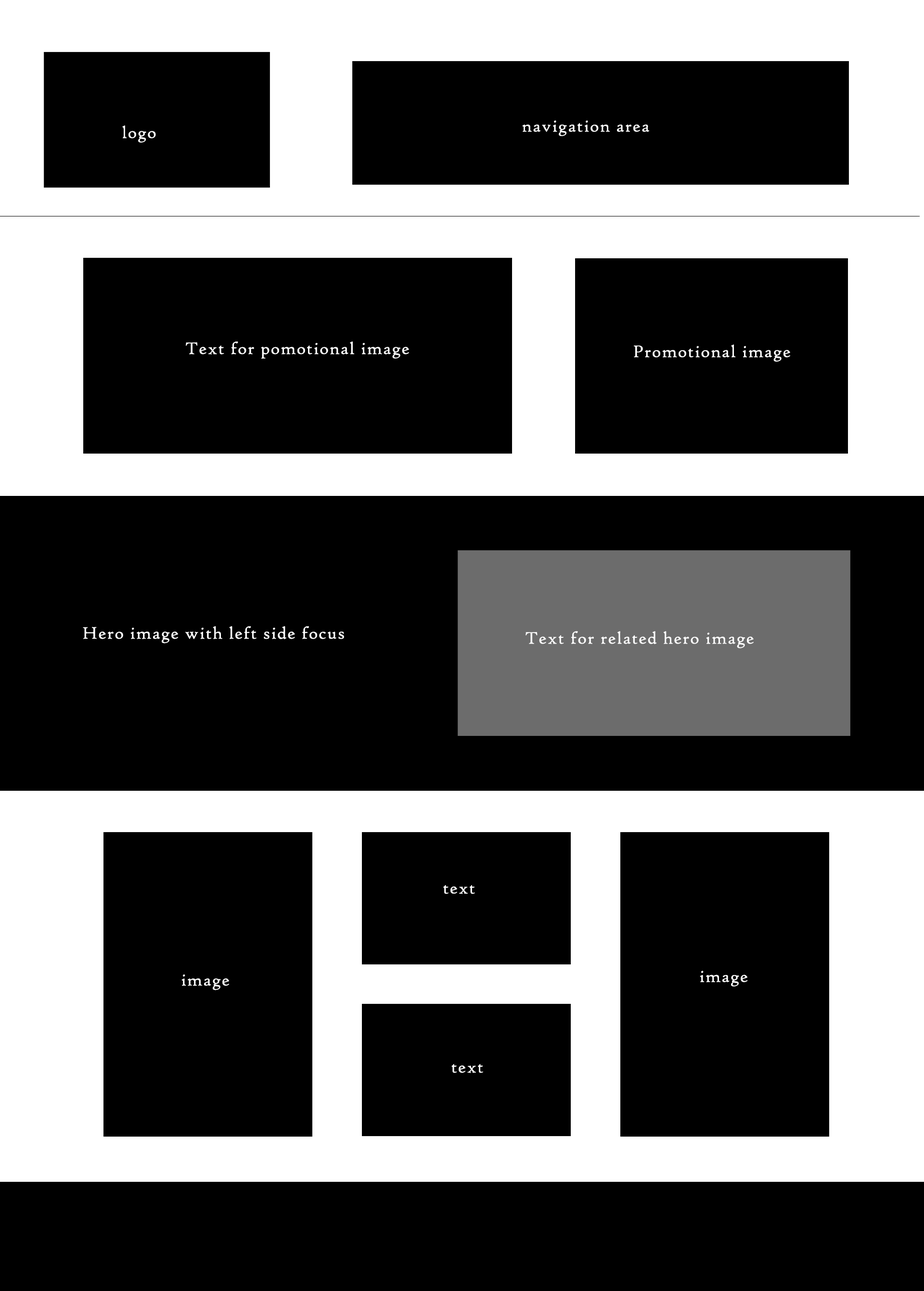
<style>
.page{position:relative;width:924px;height:1291px;background:#000000}
.page>*{position:absolute;margin:0}
.t1{font:18px "HighTowerText-Reg";letter-spacing:0.05em;color:#ffffff}
</style>
<div class="page">
<p class="t1" style="left:122px;top:125px;width:34px;height:18px">logo</p>
<p class="t1" style="left:522px;top:120px;width:127px;height:16px">navigation area</p>
<p class="t1" style="left:186px;top:342px;width:223px;height:17px">Text for pomotional image</p>
<p class="t1" style="left:634px;top:344px;width:156px;height:18px">Promotional image</p>
<p class="t1" style="left:83px;top:626px;width:261px;height:18px">Hero image with left side focus</p>
<p class="t1" style="left:525px;top:631px;width:228px;height:17px">Text for related hero image</p>
<p class="t1" style="left:443px;top:885px;width:32px;height:9px">text</p>
<p class="t1" style="left:181px;top:975px;width:48px;height:15px">image</p>
<p class="t1" style="left:699px;top:971px;width:49px;height:16px">image</p>
<p class="t1" style="left:451px;top:1064px;width:32px;height:9px">text</p>
</div>
